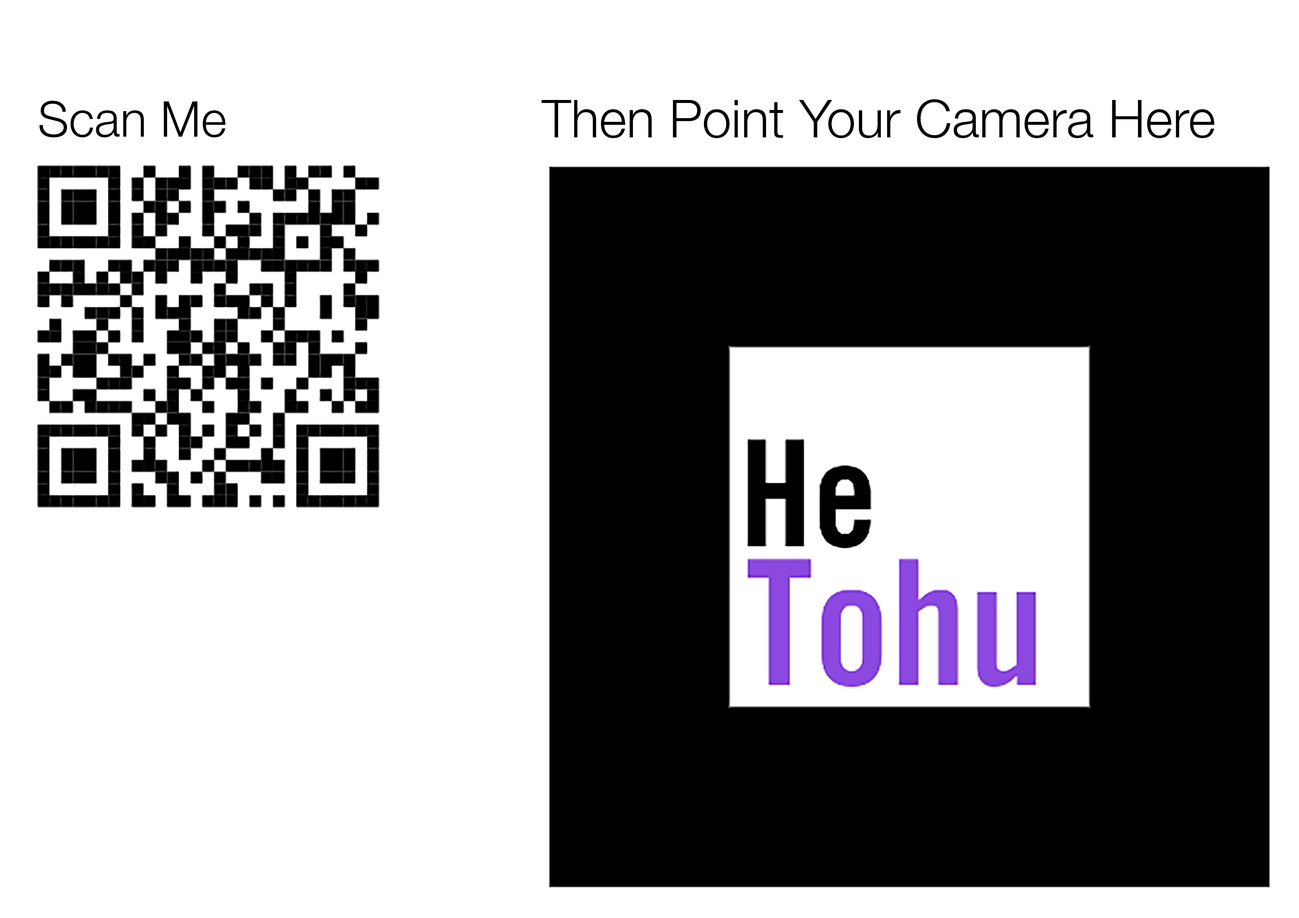
<style>
.page{position:relative;width:1299px;height:918px;background:#ffffff}
.page>*{position:absolute;margin:0}
.t1{font:49.4px "HelveticaNeue-Light";color:#000000}
.t2{font:52.5px "HelveticaNeue-Light";color:#000000}
</style>
<div class="page">
<p class="t1" style="left:39px;top:101px;width:187px;height:36px">Scan Me</p>
<p class="t2" style="left:541px;top:99px;width:674px;height:39px">Then Point Your Camera Here</p>
</div>
